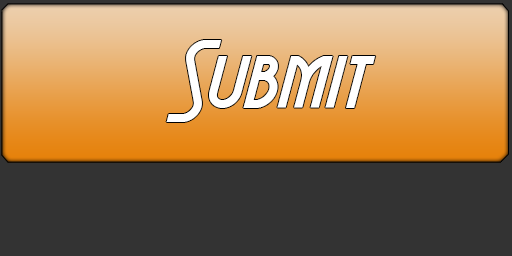
<style>
.page{position:relative;width:512px;height:256px;background:#333333}
.page>*{position:absolute;margin:0}
.t1{font:100px "AeroviasBrasilNF";color:#ffffff}
</style>
<div class="page">
<p class="t1" style="left:166px;top:40px;width:210px;height:82px">Submit</p>
</div>
